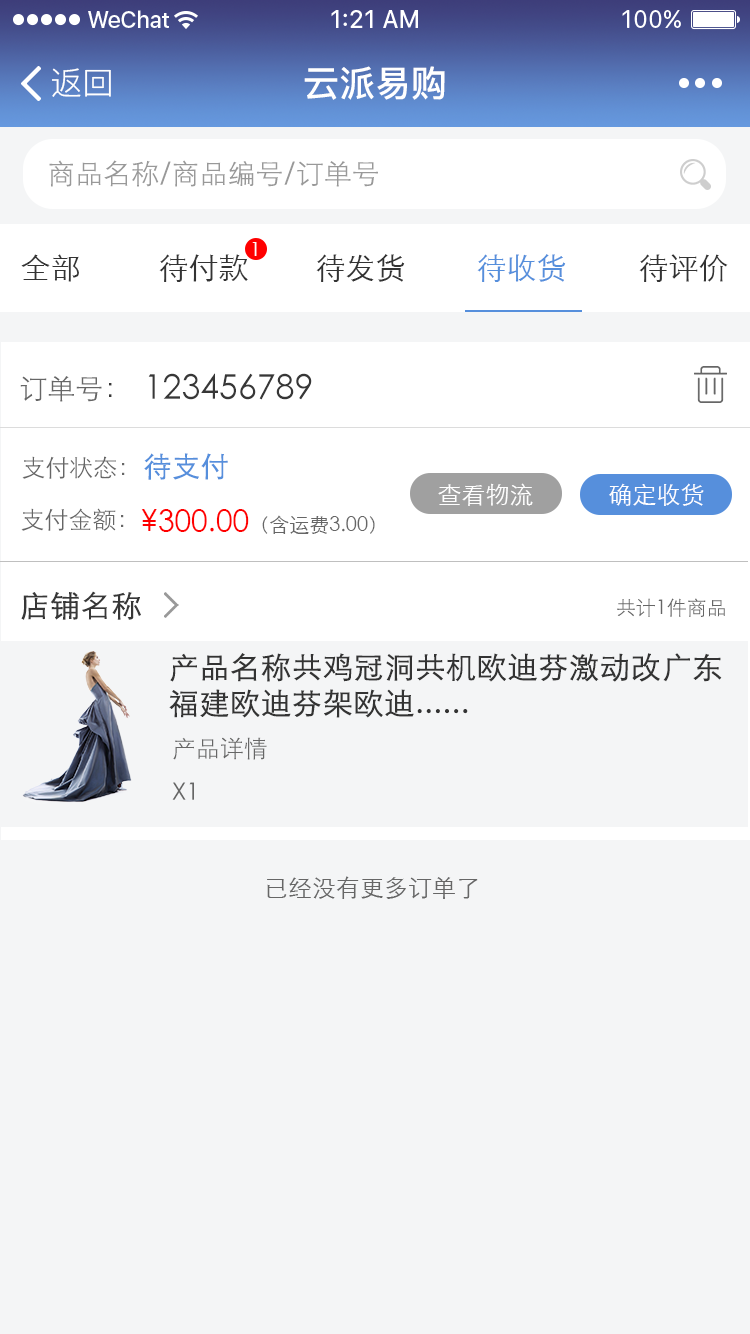
<style>
.page{position:relative;width:750px;height:1334px;background:#f4f5f6}
.page>*{position:absolute;margin:0}
.t1{font:32px "PingFang-SC-Regular";color:#ffffff}
.t2{font:36px "PingFang-SC-Bold";color:#ffffff}
.t3{font:28px "STXihei";color:#999999}
.t4{font:20px "STXihei";color:#fcfcfc}
.t5{font:30px "STXihei";color:#333333}
.t6{font:30px "STXihei";color:#568fdc}
.t7{font:28px "STXihei";color:#666666}
.t8{font:28px "STXihei";color:#373737}
.t9{font:34px "STXihei";color:#373737}
.t10{font:24px "STXihei";color:#666666}
.t11{font:28px "STXihei";color:#568fdc;font-weight:bold}
.t12{font:24px "STXihei";color:#fefefe}
.t13{font:24px "STXihei";color:#fefeff}
.t14{font:20px "STXihei";color:#666666}
.t15{font:30px "STXihei";color:#ff0000}
.t16{font:30px "STXihei";color:#373737;font-weight:bold}
.t17{font:30px "STXihei";color:#333333;font-weight:bold}
</style>
<div class="page">
<p class="t1" style="left:52px;top:68px;width:59px;height:29px">返回</p>
<p class="t2" style="left:304px;top:66px;width:141px;height:34px">云派易购</p>
<p class="t3" style="left:49px;top:160px;width:329px;height:27px">商品名称/商品编号/订单号</p>
<p class="t4" style="left:252px;top:242px;width:5px;height:14px">1</p>
<p class="t5" style="left:21px;top:254px;width:58px;height:28px">全部</p>
<p class="t5" style="left:159px;top:254px;width:89px;height:28px">待付款</p>
<p class="t5" style="left:316px;top:254px;width:89px;height:28px">待发货</p>
<p class="t6" style="left:477px;top:254px;width:89px;height:28px">待收货</p>
<p class="t5" style="left:639px;top:254px;width:89px;height:28px">待评价</p>
<p class="t7" style="left:20px;top:376px;width:92px;height:26px">订单号<span class="t8">：</span></p>
<p class="t9" style="left:148px;top:373px;width:164px;height:27px">123456789</p>
<p class="t10" style="left:22px;top:456px;width:103px;height:23px">支付状态：</p>
<p class="t11" style="left:144px;top:453px;width:84px;height:27px">待支付</p>
<p class="t12" style="left:438px;top:483px;width:95px;height:23px">查看物流</p>
<p class="t13" style="left:609px;top:483px;width:95px;height:23px">确定收货</p>
<p class="t10" style="left:21px;top:508px;width:103px;height:23px">支付金额：</p>
<p class="t14" style="left:141px;top:509px;width:234px;height:25px"><span class="t15">¥300.00</span>（含运费3.00）</p>
<p class="t16" style="left:21px;top:591px;width:120px;height:29px">店铺名称</p>
<p class="t14" style="left:617px;top:598px;width:108px;height:19px">共计1件商品</p>
<p class="t17" style="left:169px;top:653px;width:553px;height:65px">产品名称共鸡冠洞共机欧迪芬激动改广东福建欧迪芬架欧迪......</p>
<p class="t10" style="left:173px;top:737px;width:94px;height:23px">产品详情</p>
<p class="t10" style="left:172px;top:782px;width:22px;height:18px">X1</p>
<p class="t10" style="left:267px;top:876px;width:211px;height:23px">已经没有更多订单了</p>
</div>
